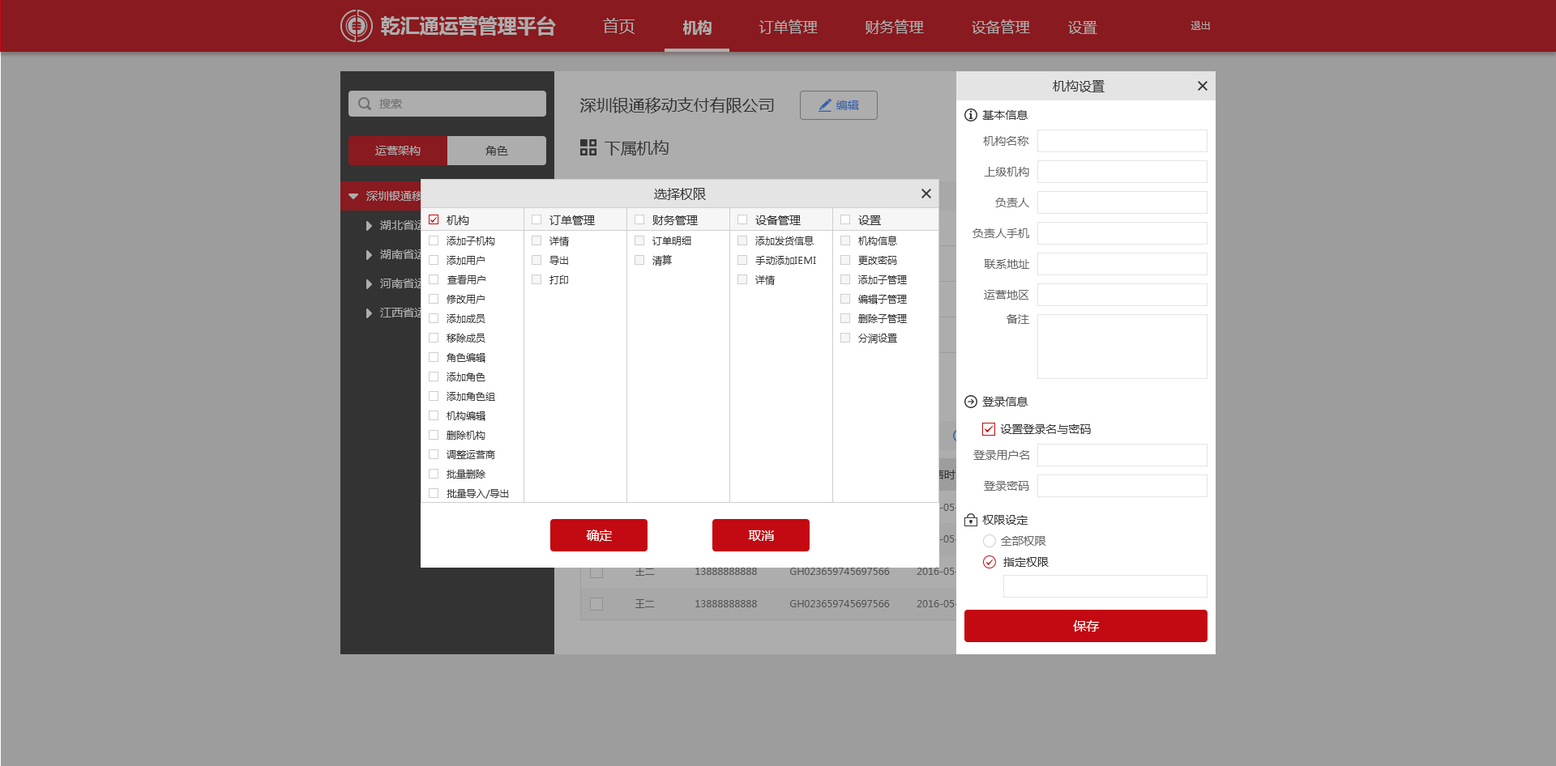
<style>
.page{position:relative;width:1556px;height:766px;background:#9d9d9d}
.page>*{position:absolute;margin:0}
.t1{font:19.4px "MicrosoftYaHei-Bold";color:#adadad}
.t2{font:16.2px "MicrosoftYaHei";color:#adadad}
.t3{font:14.6px "MicrosoftYaHei-Bold";color:#adadad}
.t4{font:14.6px "MicrosoftYaHei";color:#adadad}
.t5{font:9.7px "MicrosoftYaHei";color:#adadad}
.t6{font:13px "MicrosoftYaHei";color:#333333}
.t7{font:11.3px "MicrosoftYaHei";color:#707070}
.t8{font:16.2px "MicrosoftYaHei";color:#333333}
.t9{font:11.3px "MicrosoftYaHei";color:#3661a8}
.t10{font:11.3px "MicrosoftYaHei";color:#333333}
.t11{font:11.3px "MicrosoftYaHei";color:#666666}
.t12{font:11.3px "MicrosoftYaHei";color:#adadad}
.t13{font:11.3px "MicrosoftYaHei"}
.t14{font:9.7px "MicrosoftYaHei";color:#333333}
.t15{font:13px "MicrosoftYaHei";color:#ffffff}
.t16{font:9.7px "MicrosoftYaHei";color:#666666}
</style>
<div class="page">
<p class="t1" style="left:381px;top:16px;width:175px;height:20px">乾汇通运营管理平台</p>
<p class="t2" style="left:603px;top:18px;width:31px;height:16px">首页</p>
<p class="t3" style="left:683px;top:20px;width:28px;height:15px">机构</p>
<p class="t4" style="left:758px;top:19px;width:60px;height:15px">订单管理</p>
<p class="t4" style="left:865px;top:19px;width:59px;height:15px">财务管理</p>
<p class="t4" style="left:971px;top:19px;width:59px;height:15px">设备管理</p>
<p class="t4" style="left:1068px;top:21px;width:29px;height:13px">设置</p>
<p class="t5" style="left:1190px;top:21px;width:20px;height:9px">退出</p>
<p class="t6" style="left:1053px;top:80px;width:51px;height:12px">机构设置</p>
<p class="t7" style="left:379px;top:99px;width:23px;height:10px">搜索</p>
<p class="t8" style="left:580px;top:97px;width:194px;height:16px">深圳银通移动支付有限公司</p>
<p class="t9" style="left:836px;top:100px;width:23px;height:10px">编辑</p>
<p class="t10" style="left:982px;top:110px;width:46px;height:10px">基本信息</p>
<p class="t11" style="left:983px;top:136px;width:46px;height:10px">机构名称</p>
<p class="t12" style="left:375px;top:146px;width:46px;height:10px">运营架构</p>
<p class="t10" style="left:485px;top:146px;width:23px;height:10px">角色</p>
<p class="t8" style="left:604px;top:140px;width:64px;height:16px">下属机构</p>
<p class="t11" style="left:984px;top:167px;width:45px;height:10px">上级机构</p>
<p class="t6" style="left:654px;top:188px;width:52px;height:12px">选择权限</p>
<p class="t11" style="left:995px;top:198px;width:34px;height:9px">负责人</p>
<p class="t13" style="left:380px;top:220px;width:57px;height:10px">湖北省运营</p>
<p class="t10" style="left:446px;top:216px;width:23px;height:9px">机构</p>
<p class="t10" style="left:549px;top:216px;width:46px;height:9px">订单管理</p>
<p class="t10" style="left:652px;top:216px;width:46px;height:9px">财务管理</p>
<p class="t10" style="left:755px;top:216px;width:46px;height:9px">设备管理</p>
<p class="t10" style="left:858px;top:216px;width:23px;height:9px">设置</p>
<p class="t11" style="left:972px;top:228px;width:57px;height:10px">负责人手机</p>
<p class="t14" style="left:446px;top:237px;width:49px;height:9px">添加子机构</p>
<p class="t14" style="left:549px;top:237px;width:20px;height:9px">详情</p>
<p class="t14" style="left:652px;top:237px;width:39px;height:9px">订单明细</p>
<p class="t14" style="left:755px;top:236px;width:58px;height:10px">添加发货信息</p>
<p class="t14" style="left:858px;top:236px;width:39px;height:10px">机构信息</p>
<p class="t13" style="left:380px;top:250px;width:57px;height:9px">湖南省运营</p>
<p class="t14" style="left:446px;top:256px;width:39px;height:9px">添加用户</p>
<p class="t14" style="left:549px;top:256px;width:19px;height:9px">导出</p>
<p class="t14" style="left:652px;top:255px;width:20px;height:11px">清算</p>
<p class="t14" style="left:755px;top:256px;width:61px;height:9px">手动添加IEMI</p>
<p class="t14" style="left:858px;top:256px;width:39px;height:9px">更改密码</p>
<p class="t11" style="left:984px;top:259px;width:46px;height:10px">联系地址</p>
<p class="t13" style="left:380px;top:279px;width:57px;height:9px">河南省运营</p>
<p class="t14" style="left:447px;top:275px;width:38px;height:9px">查看用户</p>
<p class="t14" style="left:549px;top:275px;width:19px;height:9px">打印</p>
<p class="t14" style="left:755px;top:275px;width:20px;height:10px">详情</p>
<p class="t14" style="left:858px;top:275px;width:49px;height:9px">添加子管理</p>
<p class="t11" style="left:984px;top:290px;width:45px;height:10px">运营地区</p>
<p class="t14" style="left:446px;top:295px;width:39px;height:9px">修改用户</p>
<p class="t14" style="left:858px;top:295px;width:49px;height:10px">编辑子管理</p>
<p class="t13" style="left:380px;top:308px;width:57px;height:10px">江西省运营</p>
<p class="t14" style="left:446px;top:314px;width:39px;height:9px">添加成员</p>
<p class="t14" style="left:858px;top:314px;width:49px;height:9px">删除子管理</p>
<p class="t11" style="left:1006px;top:314px;width:23px;height:10px">备注</p>
<p class="t14" style="left:446px;top:334px;width:39px;height:9px">移除成员</p>
<p class="t14" style="left:858px;top:334px;width:39px;height:10px">分润设置</p>
<p class="t14" style="left:446px;top:353px;width:39px;height:10px">角色编辑</p>
<p class="t14" style="left:446px;top:373px;width:39px;height:9px">添加角色</p>
<p class="t14" style="left:446px;top:392px;width:49px;height:9px">添加角色组</p>
<p class="t10" style="left:982px;top:397px;width:46px;height:10px">登录信息</p>
<p class="t14" style="left:446px;top:412px;width:39px;height:9px">机构编辑</p>
<p class="t10" style="left:1000px;top:425px;width:91px;height:9px">设置登录名与密码</p>
<p class="t14" style="left:446px;top:431px;width:39px;height:9px">删除机构</p>
<p class="t14" style="left:446px;top:451px;width:49px;height:8px">调整运营商</p>
<p class="t11" style="left:973px;top:451px;width:56px;height:9px">登录用户名</p>
<p class="t14" style="left:446px;top:470px;width:39px;height:9px">批量删除</p>
<p class="t11" style="left:984px;top:481px;width:45px;height:10px">登录密码</p>
<p class="t14" style="left:446px;top:489px;width:63px;height:10px">批量导入/导出</p>
<p class="t10" style="left:982px;top:515px;width:45px;height:10px">权限设定</p>
<p class="t15" style="left:586px;top:530px;width:26px;height:12px">确定</p>
<p class="t15" style="left:748px;top:531px;width:26px;height:10px">取消</p>
<p class="t11" style="left:1001px;top:536px;width:45px;height:10px">全部权限</p>
<p class="t10" style="left:1003px;top:557px;width:45px;height:10px">指定权限</p>
<p class="t16" style="left:635px;top:567px;width:20px;height:9px">王二</p>
<p class="t16" style="left:695px;top:568px;width:62px;height:7px">13888888888</p>
<p class="t16" style="left:790px;top:568px;width:100px;height:7px">GH023659745697566</p>
<p class="t16" style="left:916px;top:568px;width:54px;height:7px">2016-05-06</p>
<p class="t16" style="left:635px;top:600px;width:20px;height:9px">王二</p>
<p class="t16" style="left:695px;top:600px;width:62px;height:8px">13888888888</p>
<p class="t16" style="left:790px;top:600px;width:100px;height:8px">GH023659745697566</p>
<p class="t16" style="left:916px;top:600px;width:54px;height:8px">2016-05-06</p>
<p class="t15" style="left:1073px;top:621px;width:27px;height:11px">保存</p>
</div>
